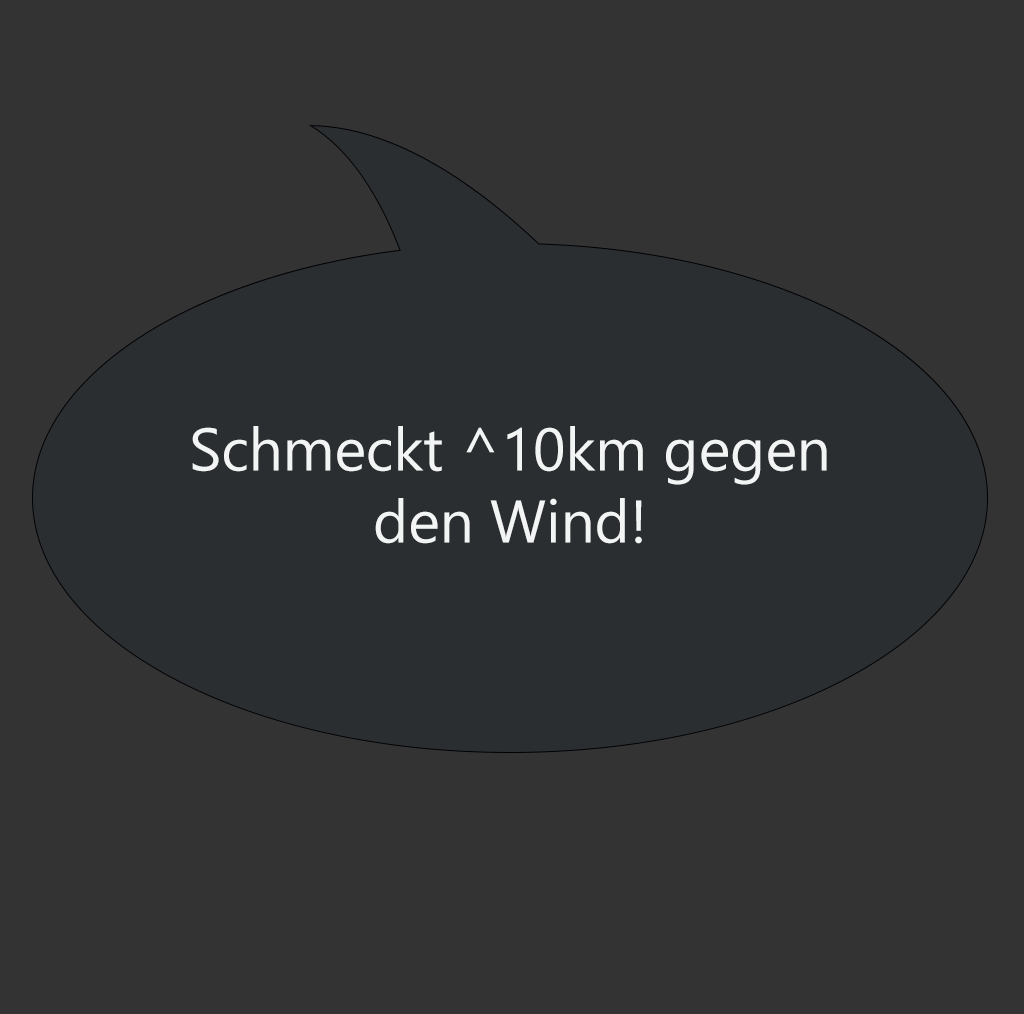
<style>
.page{position:relative;width:1024px;height:1014px;background:#333333}
.page>*{position:absolute;margin:0}
.t1{font:60px "SegoeUI";color:#f2f5f4}
</style>
<div class="page">
<p class="t1" style="left:192px;top:426px;width:635px;height:118px;text-align:center">Schmeckt ^10km gegen den Wind!</p>
</div>
